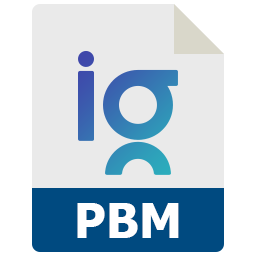
<style>
.page{position:relative;width:256px;height:256px;background:#eaeaea}
.page>*{position:absolute;margin:0}
.t1{font:48px "Tahoma-Bold";color:#ffffff}
</style>
<div class="page">
<p class="t1" style="left:77px;top:203px;width:102px;height:35px">PBM</p>
</div>
